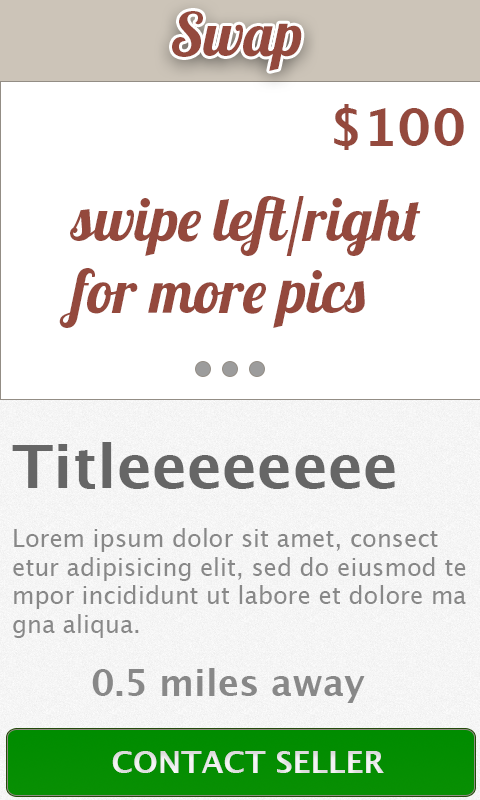
<style>
.page{position:relative;width:480px;height:800px;background:#ffffff}
.page>*{position:absolute;margin:0}
.t1{font:60px "Lobster1.4";color:#94493d}
.t2{font:52px "LucidaGrande-Bold";color:#94493d}
.t3{font:60px "LucidaGrande-Bold";color:#666666}
.t4{font:24px "LucidaGrande";color:#888888}
.t5{font:36px "LucidaGrande-Bold";color:#888888}
.t6{font:30px "LucidaGrande-Bold";color:#e8e8e8}
</style>
<div class="page">
<p class="t1" style="left:172px;top:11px;width:130px;height:60px">Swap</p>
<p class="t2" style="left:334px;top:104px;width:130px;height:46px">$100</p>
<p class="t1" style="left:59px;top:196px;width:362px;height:132px">swipe left/right<br>for more pics</p>
<p class="t3" style="left:12px;top:442px;width:383px;height:47px">Titleeeeeeee</p>
<p class="t4" style="left:13px;top:528px;width:453px;height:110px">Lorem ipsum dolor sit amet, consect<br>etur adipisicing elit, sed do eiusmod te<br>mpor incididunt ut labore et dolore ma<br>gna aliqua.</p>
<p class="t5" style="left:92px;top:668px;width:273px;height:35px">0.5 miles away</p>
<p class="t6" style="left:112px;top:751px;width:272px;height:22px">CONTACT SELLER</p>
</div>
